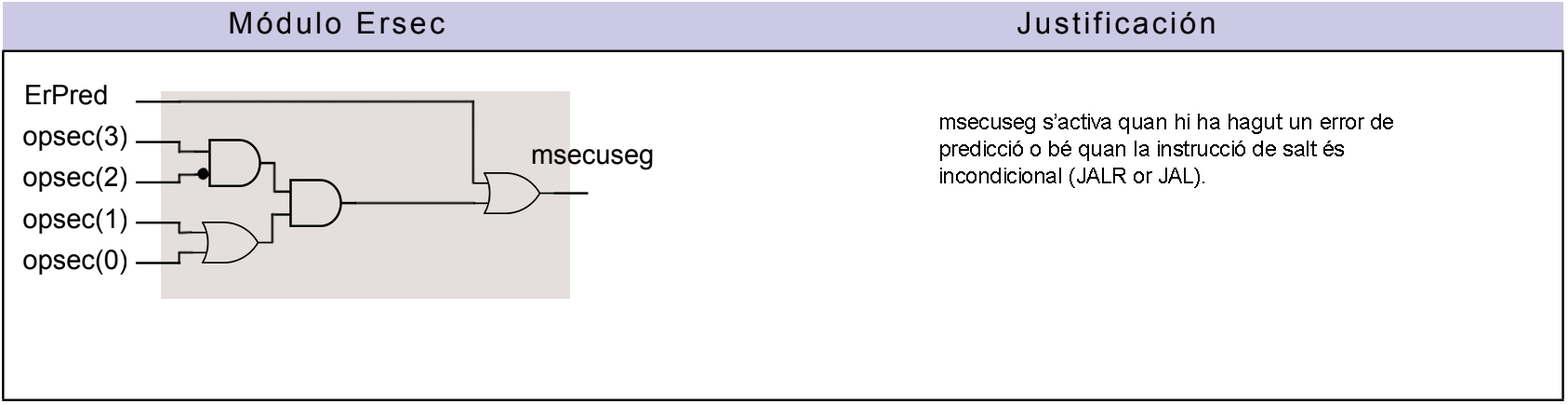
<style>
.page{position:relative;width:1568px;height:404px;background:#ffffff}
.page>*{position:absolute;margin:0}
.t1{font:22.3px "ArialMT";letter-spacing:-0.02em;color:#000000}
</style>
<div class="page">
<p class="t1" style="left:940px;top:113px;width:453px;height:75px">msecuseg s’activa quan hi ha hagut un error de<br>predicció o bé quan la instrucció de salt és<br>incondicional (JALR or JAL).</p>
</div>
